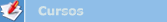
<style>
.page{position:relative;width:167px;height:22px;background:#8fbee8}
.page>*{position:absolute;margin:0}
.t1{font:12px "Verdana-Bold";color:#d4e4e8}
</style>
<div class="page">
<p class="t1" style="left:38px;top:6px;width:46px;height:10px">Cursos</p>
</div>
